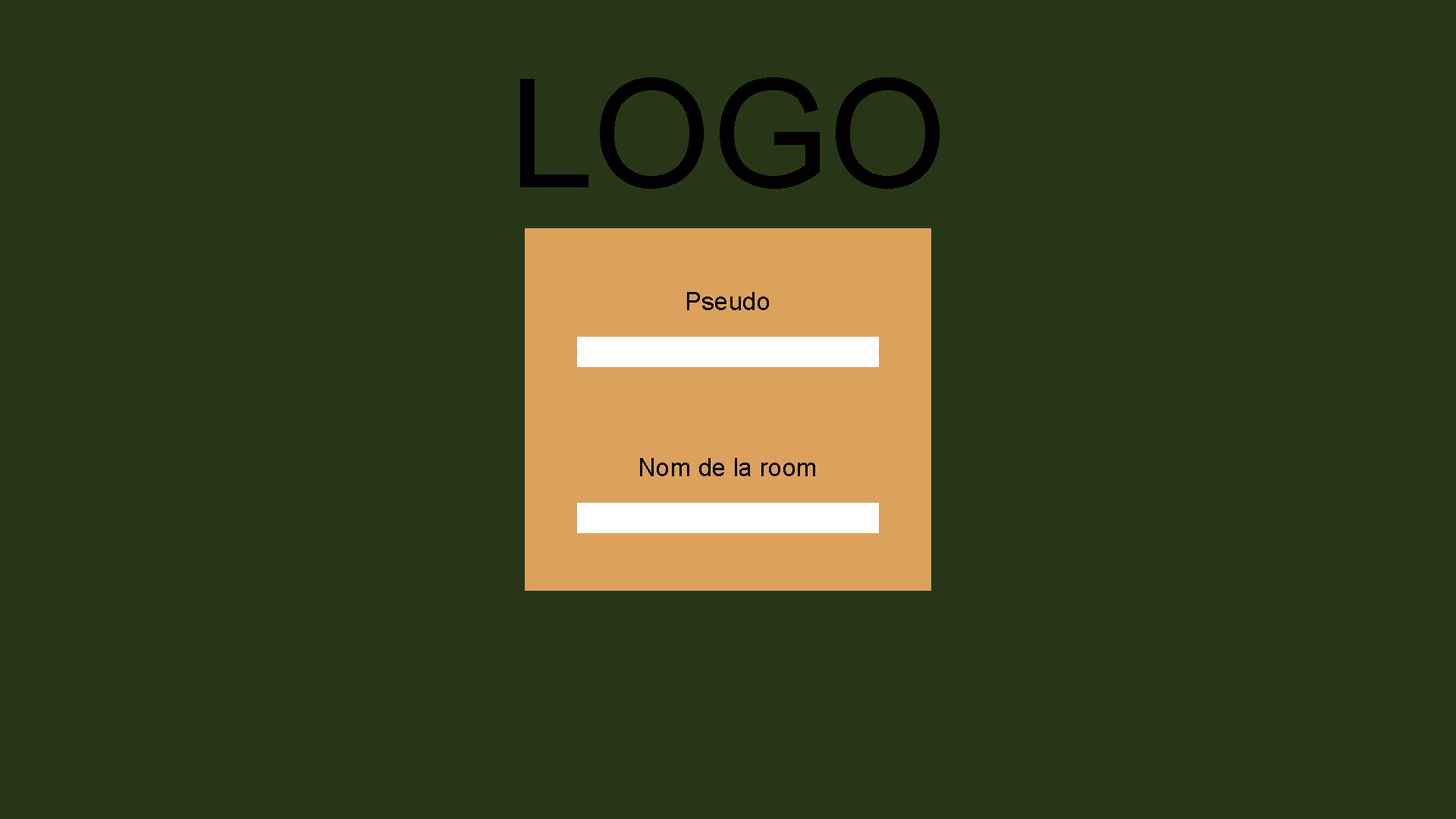
<style>
.page{position:relative;width:1456px;height:819px;background:#283618}
.page>*{position:absolute;margin:0}
.t1{font:151.7px "ArialMT";color:#000000}
.t2{font:25.3px "ArialMT";color:#000000}
</style>
<div class="page">
<p class="t1" style="left:520px;top:77px;width:420px;height:112px">LOGO</p>
<p class="t2" style="left:687px;top:292px;width:82px;height:18px">Pseudo</p>
<p class="t2" style="left:640px;top:458px;width:175px;height:18px">Nom de la room</p>
</div>
